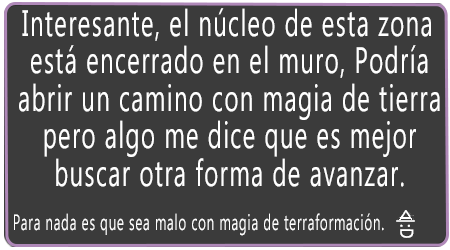
<style>
.page{position:relative;width:450px;height:250px;background:#3b3b3b}
.page>*{position:absolute;margin:0}
.t1{font:36.8px/37.5px "LaoUI";letter-spacing:0.06em;color:#ffffff;scale:0.65 1}
.t2{font:22.1px "LaoUI";letter-spacing:0.06em;color:#ffffff;scale:0.6 1}
.t3{font:18.4px "LaoUI";letter-spacing:0.06em;color:#ffffff;font-weight:bold;scale:0.78 1}
</style>
<div class="page">
<p class="t1" style="left:19px;top:8px;width:421px;height:179px;text-align:center">Interesante, el núcleo de esta zona está encerrado en el muro, Podría abrir un camino con magia de tierra pero algo me dice que es mejor buscar otra forma de avanzar.</p>
<p class="t2" style="left:14px;top:213px;width:370px;height:23px">Para nada es que sea malo con magia de terraformación.</p>
<p class="t3" style="left:396px;top:210px;width:19px;height:28px;rotate:90deg">&lt;|:D</p>
</div>
